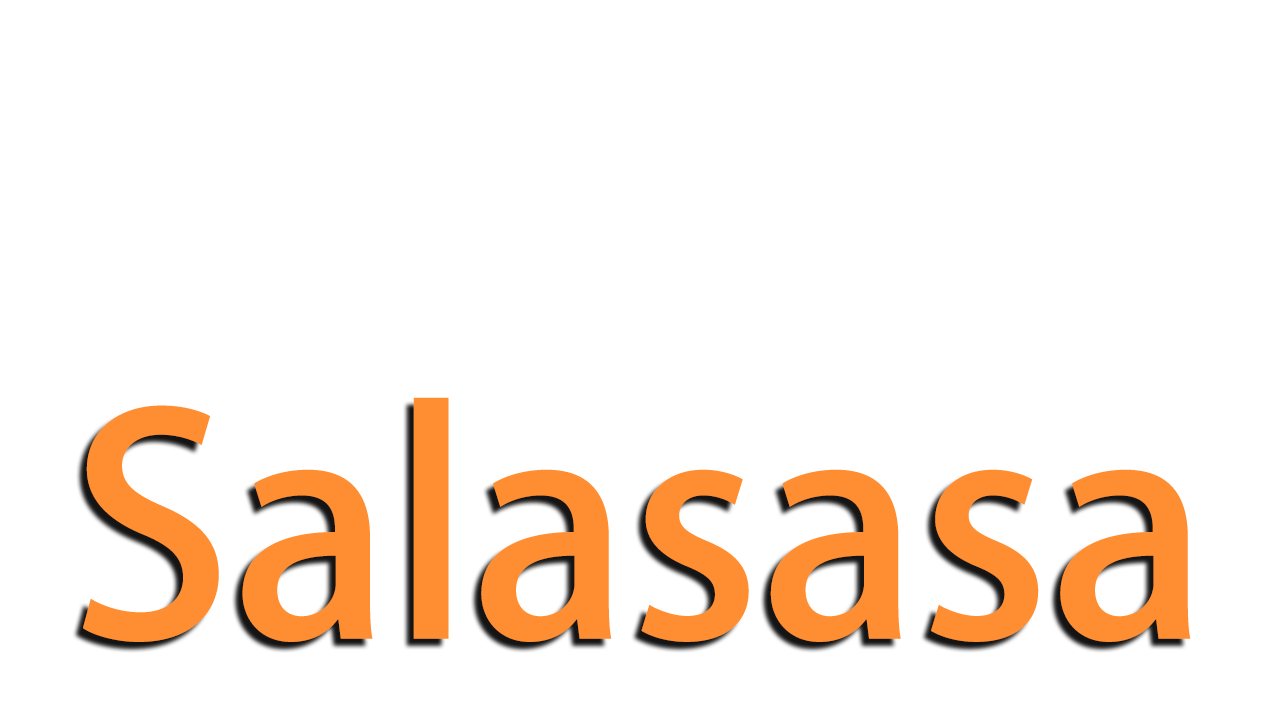
<style>
.page{position:relative;width:1280px;height:720px;background:#ffffff}
.page>*{position:absolute;margin:0}
.t1{font:300px "AdobeHeitiStd-Regular";color:#ff8e32}
</style>
<div class="page">
<p class="t1" style="left:83px;top:397px;width:1108px;height:245px">Salasasa</p>
</div>
